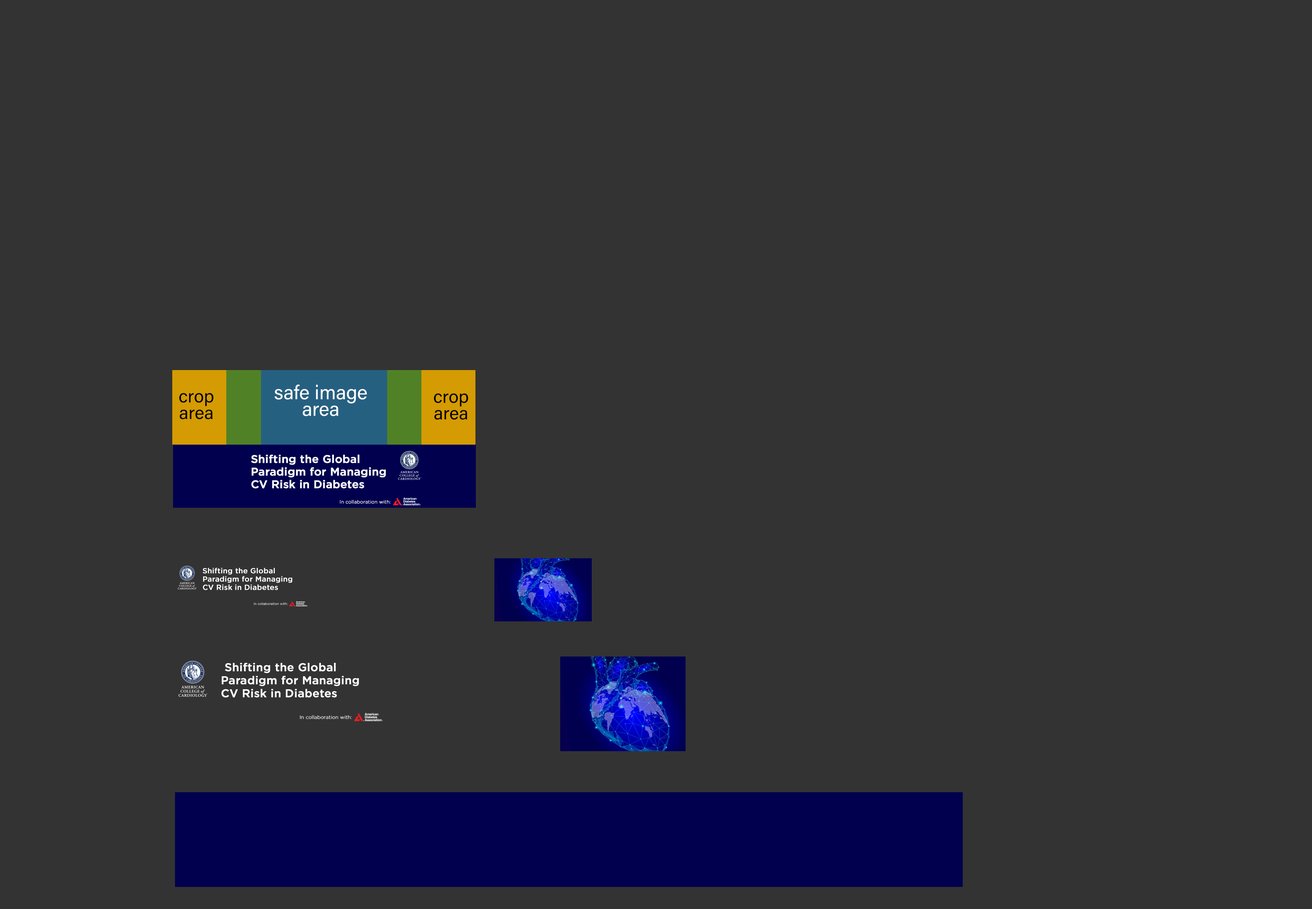
<style>
.page{position:relative;width:1312px;height:909px;background:#333333}
.page>*{position:absolute;margin:0}
.t1{font:19.7px/16.4px "AcuminConcept-Regular";color:#ffffff}
.t2{font:18.1px/16.4px "AcuminConcept-Regular";color:#000000}
.t3{font:11px/12.6px "Gotham-Medium";color:#ffffff;font-weight:bold}
.t4{font:4.7px "Gotham-Light";color:#ffffff;font-weight:bold}
.t5{font:7.3px/8.4px "Gotham-Medium";color:#ffffff;font-weight:bold}
.t6{font:3.1px "Gotham-Light";color:#ffffff;font-weight:bold}
.t7{font:11.3px/12.9px "Gotham-Medium";color:#ffffff;font-weight:bold}
.t8{font:11.3px/12.9px "Gotham-Light";color:#00aeef;font-weight:bold}
.t9{font:4.8px "Gotham-Light";color:#ffffff;font-weight:bold}
</style>
<div class="page">
<p class="t1" style="left:274px;top:384px;width:93px;height:32px;text-align:center">safe image<br>area</p>
<p class="t2" style="left:179px;top:393px;width:35px;height:26px;text-align:center">crop<br>area</p>
<p class="t2" style="left:434px;top:393px;width:34px;height:27px;text-align:center">crop<br>area</p>
<p class="t3" style="left:251px;top:454px;width:135px;height:34px">Shifting the Global <br>Paradigm for Managing <br>CV Risk in Diabetes</p>
<p class="t4" style="left:340px;top:500px;width:51px;height:4px">In collaboration with:</p>
<p class="t5" style="left:203px;top:567px;width:90px;height:23px">Shifting the Global <br>Paradigm for Managing <br>CV Risk in Diabetes</p>
<p class="t6" style="left:254px;top:602px;width:34px;height:3px">In collaboration with:</p>
<p class="t7" style="left:221px;top:663px;width:138px;height:34px"><span class="t8"> </span>Shifting the Global <br>Paradigm for Managing <br>CV Risk in Diabetes</p>
<p class="t9" style="left:300px;top:715px;width:52px;height:4px">In collaboration with:</p>
</div>
